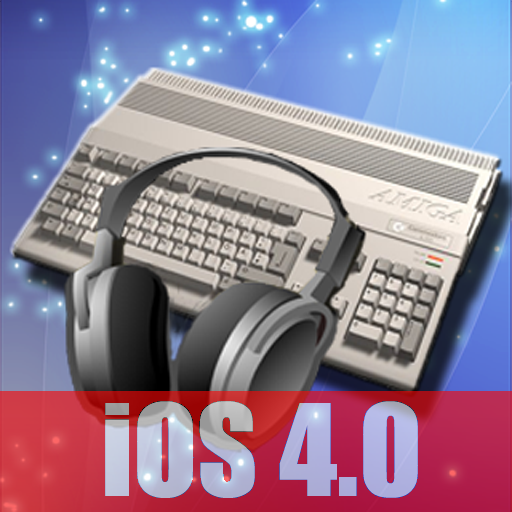
<style>
.page{position:relative;width:512px;height:512px}
.page>*{position:absolute;margin:0}
.t1{font:117.5px "Impact"}
</style>
<div class="page">
<p class="t1" style="left:105px;top:401px;width:313px;height:97px">iOS 4.0</p>
</div>
